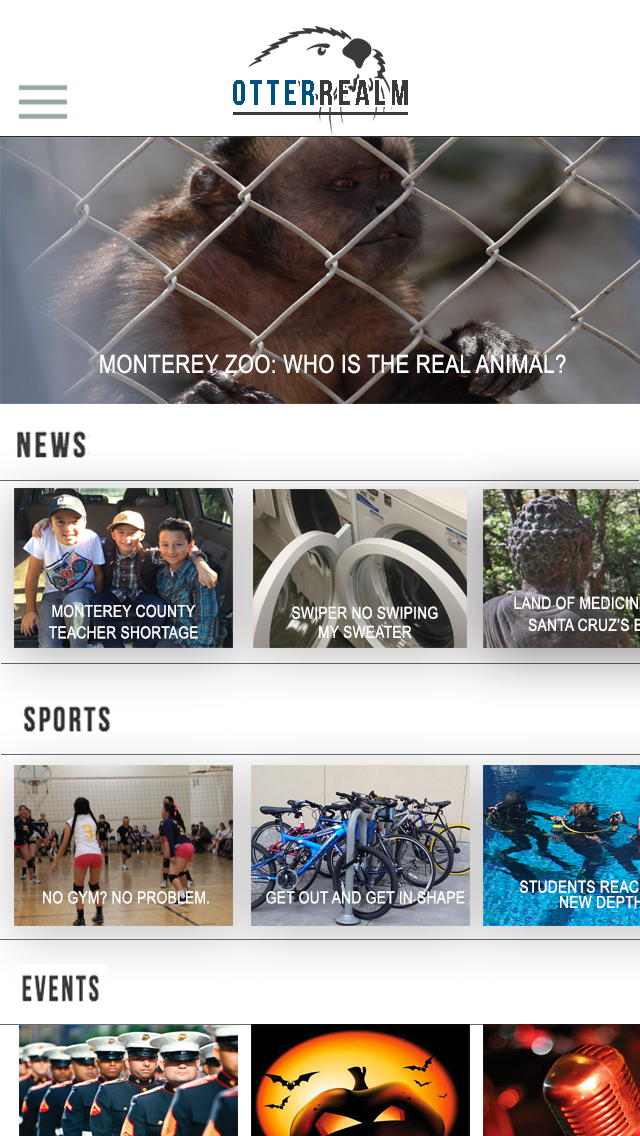
<style>
.page{position:relative;width:640px;height:1136px;background:#ffffff}
.page>*{position:absolute;margin:0}
.t1{font:25px "ArialNarrow";letter-spacing:0.02em;color:#ffffff}
.t2{font:16.7px "ArialNarrow";letter-spacing:0.02em;color:#ffffff}
</style>
<div class="page">
<p class="t1" style="left:100px;top:354px;width:466px;height:20px">MONTEREY ZOO: WHO IS THE REAL ANIMAL?</p>
<p class="t2" style="left:52px;top:604px;width:143px;height:14px">MONTEREY COUNTY</p>
<p class="t2" style="left:292px;top:606px;width:146px;height:13px">SWIPER NO SWIPING</p>
<p class="t2" style="left:49px;top:626px;width:149px;height:13px">TEACHER SHORTAGE</p>
<p class="t2" style="left:319px;top:625px;width:93px;height:14px">MY SWEATER</p>
<p class="t2" style="left:43px;top:891px;width:166px;height:13px">NO GYM? NO PROBLEM.</p>
<p class="t2" style="left:266px;top:891px;width:199px;height:13px">GET OUT AND GET IN SHAPE</p>
</div>
